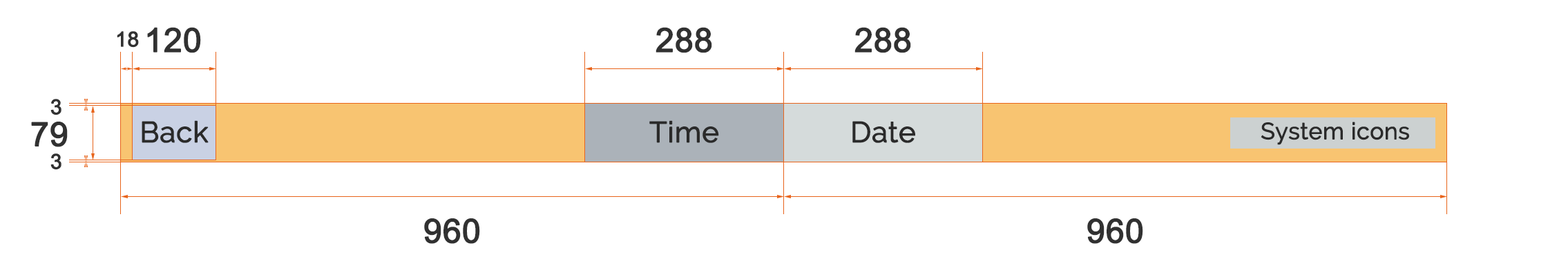
<style>
.page{position:relative;width:1568px;height:266px;background:#ffffff}
.page>*{position:absolute;margin:0}
.t1{font:33.2px "ArialMT";color:#313131;font-weight:bold}
.t2{font:20.7px "ArialMT";color:#313131;font-weight:bold}
</style>
<div class="page">
<p class="t1" style="left:147px;top:27px;width:54px;height:26px">120</p>
<p class="t1" style="left:656px;top:27px;width:56px;height:26px">288</p>
<p class="t1" style="left:854px;top:27px;width:57px;height:26px">288</p>
<p class="t2" style="left:117px;top:31px;width:22px;height:17px">18</p>
<p class="t2" style="left:50px;top:99px;width:11px;height:16px">3</p>
<p class="t1" style="left:31px;top:122px;width:37px;height:25px">79</p>
<p class="t2" style="left:50px;top:153px;width:11px;height:17px">3</p>
<p class="t1" style="left:424px;top:218px;width:56px;height:26px">960</p>
<p class="t1" style="left:1087px;top:218px;width:56px;height:26px">960</p>
</div>
